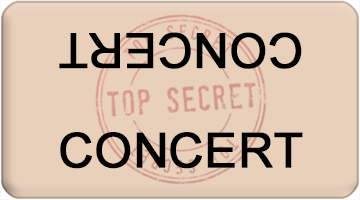
<style>
.page{position:relative;width:360px;height:200px;background:#e8d0bb}
.page>*{position:absolute;margin:0}
.t1{font:48px "ArialMT";color:#000000;font-weight:bold}
</style>
<div class="page">
<p class="t1" style="left:59px;top:32px;width:243px;height:37px;rotate:180deg">CONCERT</p>
<p class="t1" style="left:60px;top:132px;width:243px;height:37px">CONCERT</p>
</div>
